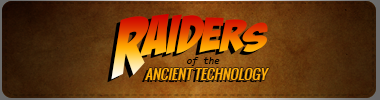
<style>
.page{position:relative;width:380px;height:100px}
.page>*{position:absolute;margin:0}
.t1{font:52.6px "BadaBoomBB"}
.t2{font:70.1px "BadaBoomBB"}
.t3{font:10px "Consolas-Italic";color:#000000}
.t4{font:14px "Oswald-Regular";color:#feae0b;font-style:italic}
</style>
<div class="page">
<p class="t1" style="left:111px;top:13px;width:157px;height:67px"><span class="t2">R</span>aiders</p>
<p class="t3" style="left:187px;top:57px;width:33px;height:9px">of the</p>
<p class="t4" style="left:145px;top:68px;width:124px;height:12px">ANCIENT TECHNOLOGY</p>
</div>
